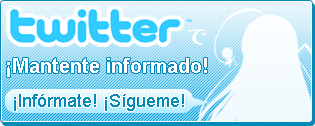
<style>
.page{position:relative;width:315px;height:126px}
.page>*{position:absolute;margin:0}
.t1{font:20px "Arial-BoldMT";color:#ffffff}
.t2{font:18px "ArialMT";color:#048ab8}
</style>
<div class="page">
<p class="t1" style="left:7px;top:58px;width:200px;height:19px">¡Mantente informado!</p>
<p class="t2" style="left:14px;top:94px;width:170px;height:17px">¡Infórmate! ¡Sígueme!</p>
</div>
